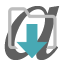
<style>
.page{position:relative;width:64px;height:64px;background:#ffffff}
.page>*{position:absolute;margin:0}
.t1{font:151.4px "Vijaya";color:#606060}
</style>
<div class="page">
<p class="t1" style="left:4px;top:6px;width:56px;height:54px">a</p>
</div>
